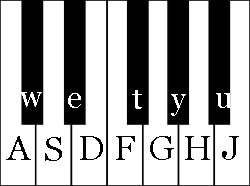
<style>
.page{position:relative;width:250px;height:186px;background:#ffffff}
.page>*{position:absolute;margin:0}
.t1{font:30px "Georgia";color:#ffffff}
.t2{font:34.4px "Georgia";color:#000000}
</style>
<div class="page">
<p class="t1" style="left:20px;top:92px;width:22px;height:15px">w</p>
<p class="t1" style="left:68px;top:93px;width:13px;height:15px">e</p>
<p class="t1" style="left:132px;top:90px;width:10px;height:19px">t</p>
<p class="t1" style="left:171px;top:94px;width:15px;height:22px">y</p>
<p class="t1" style="left:216px;top:93px;width:16px;height:15px">u</p>
<p class="t2" style="left:6px;top:136px;width:25px;height:24px">A</p>
<p class="t2" style="left:45px;top:137px;width:17px;height:24px">S</p>
<p class="t2" style="left:80px;top:136px;width:23px;height:24px">D</p>
<p class="t2" style="left:116px;top:136px;width:19px;height:24px">F</p>
<p class="t2" style="left:150px;top:136px;width:24px;height:24px">G</p>
<p class="t2" style="left:185px;top:136px;width:25px;height:24px">H</p>
<p class="t2" style="left:222px;top:136px;width:17px;height:24px">J</p>
</div>
